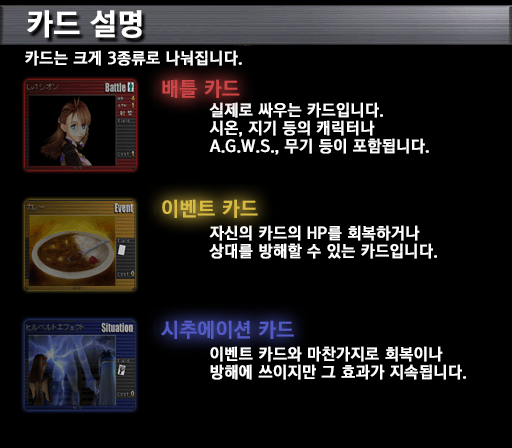
<style>
.page{position:relative;width:512px;height:448px;background:#000000}
.page>*{position:absolute;margin:0}
.t1{font:30px "KoreanGD15-R";color:#ffffff;font-weight:bold}
.t2{font:16px "KoreanGD15-R";color:#ffffff;font-weight:bold}
.t3{font:20px "KoreanGD15-R";color:#ca4545;font-weight:bold}
.t4{font:16px/18px "KoreanGD15-R";color:#ffffff;font-weight:bold}
.t5{font:20px "KoreanGD15-R";color:#d7ba44;font-weight:bold}
.t6{font:20px "KoreanGD15-R";color:#515ac5;font-weight:bold}
</style>
<div class="page">
<p class="t1" style="left:27px;top:10px;width:115px;height:28px">카드 설명</p>
<p class="t2" style="left:25px;top:50px;width:217px;height:16px">카드는 크게 3종류로 나눠집니다.</p>
<p class="t3" style="left:162px;top:79px;width:78px;height:19px">배틀 카드</p>
<p class="t4" style="left:209px;top:102px;width:220px;height:53px">실제로 싸우는 카드입니다.<br>시온, 지기 등의 캐릭터나<br>A.G.W.S., 무기 등이 포함됩니다.</p>
<p class="t5" style="left:162px;top:199px;width:96px;height:19px">이벤트 카드</p>
<p class="t4" style="left:209px;top:225px;width:228px;height:34px">자신의 카드의 HP를 회복하거나<br>상대를 방해할 수 있는 카드입니다.</p>
<p class="t6" style="left:161px;top:320px;width:133px;height:19px">시추에이션 카드</p>
<p class="t4" style="left:210px;top:346px;width:256px;height:34px">이벤트 카드와 마찬가지로 회복이나<br>방해에 쓰이지만 그 효과가 지속됩니다.</p>
</div>
